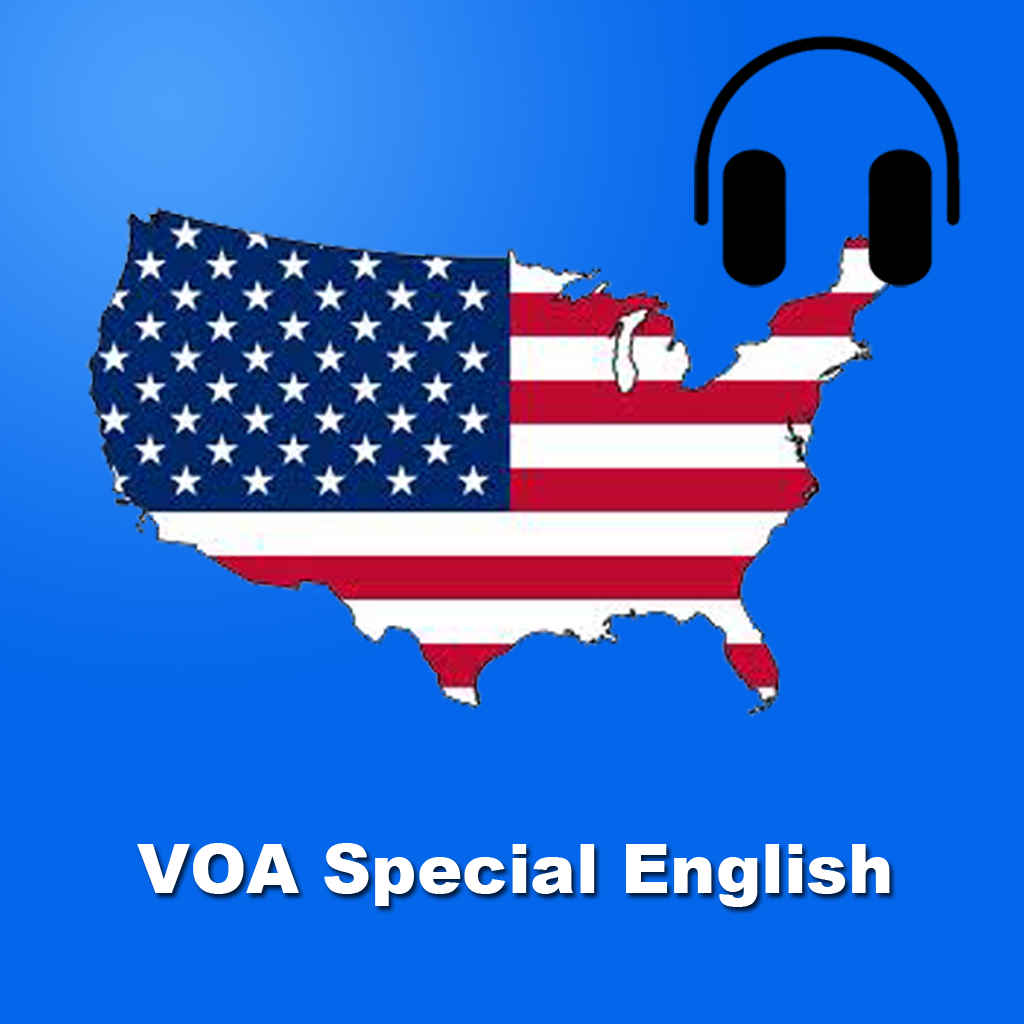
<style>
.page{position:relative;width:1024px;height:1024px;background:#0466ea}
.page>*{position:absolute;margin:0}
.t1{font:68.1px "Arial-Black";color:#ffffff}
</style>
<div class="page">
<p class="t1" style="left:137px;top:843px;width:753px;height:64px">VOA Special English</p>
</div>
